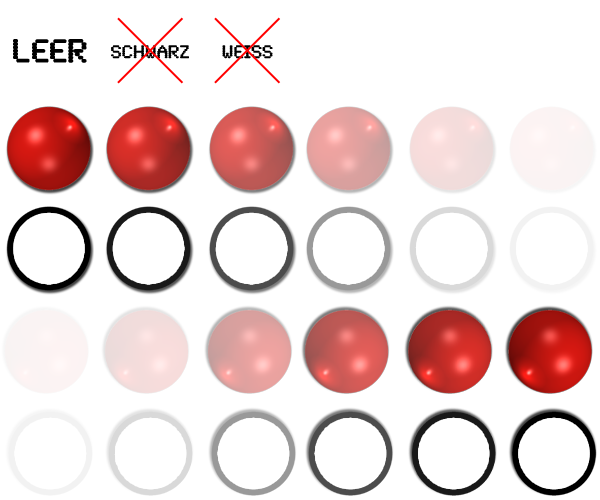
<style>
.page{position:relative;width:600px;height:500px;background:#ffffff}
.page>*{position:absolute;margin:0}
.t1{font:33.5px "Lowtech";color:#000000;font-weight:bold}
.t2{font:18.7px "Lowtech";color:#000000;font-weight:bold}
</style>
<div class="page">
<p class="t1" style="left:13px;top:39px;width:74px;height:24px">LEER</p>
<p class="t2" style="left:111px;top:45px;width:78px;height:14px">SCHWARZ</p>
<p class="t2" style="left:222px;top:45px;width:51px;height:14px">WEISS</p>
</div>
